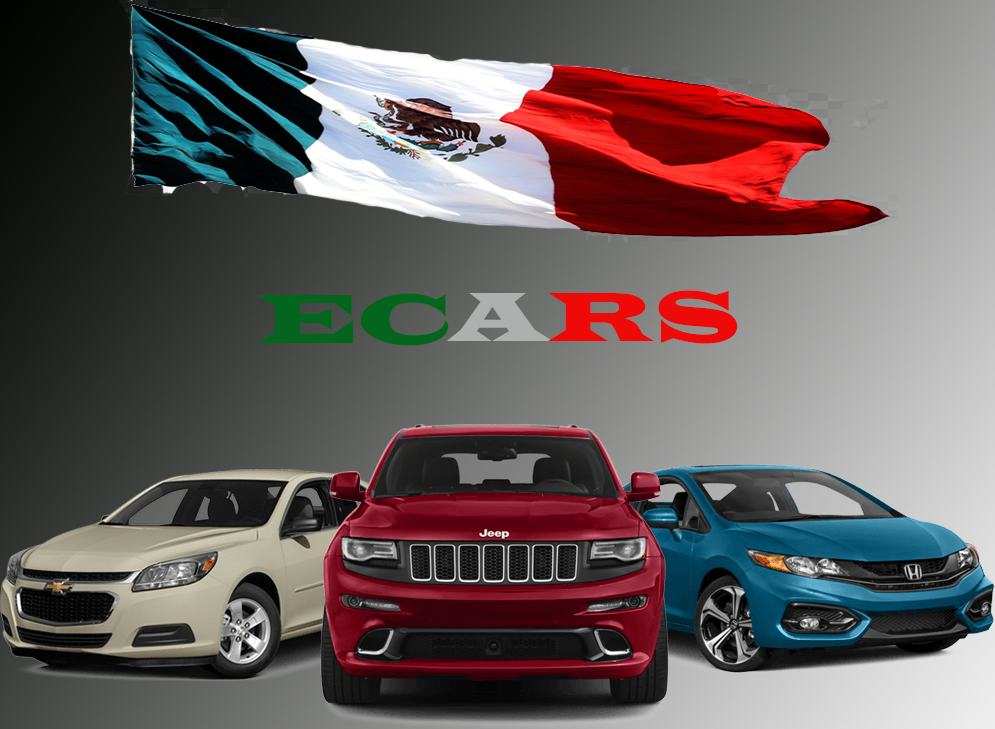
<style>
.page{position:relative;width:995px;height:729px}
.page>*{position:absolute;margin:0}
.t1{font:72px "LatinWide";color:#04651f}
.t2{font:72px "LatinWide";color:#adb0ae}
.t3{font:72px "LatinWide";color:#ef0a0a}
</style>
<div class="page">
<p class="t1" style="left:257px;top:293px;width:192px;height:53px">EC</p>
<p class="t2" style="left:446px;top:293px;width:107px;height:48px">A</p>
<p class="t3" style="left:548px;top:290px;width:190px;height:54px">RS</p>
</div>
